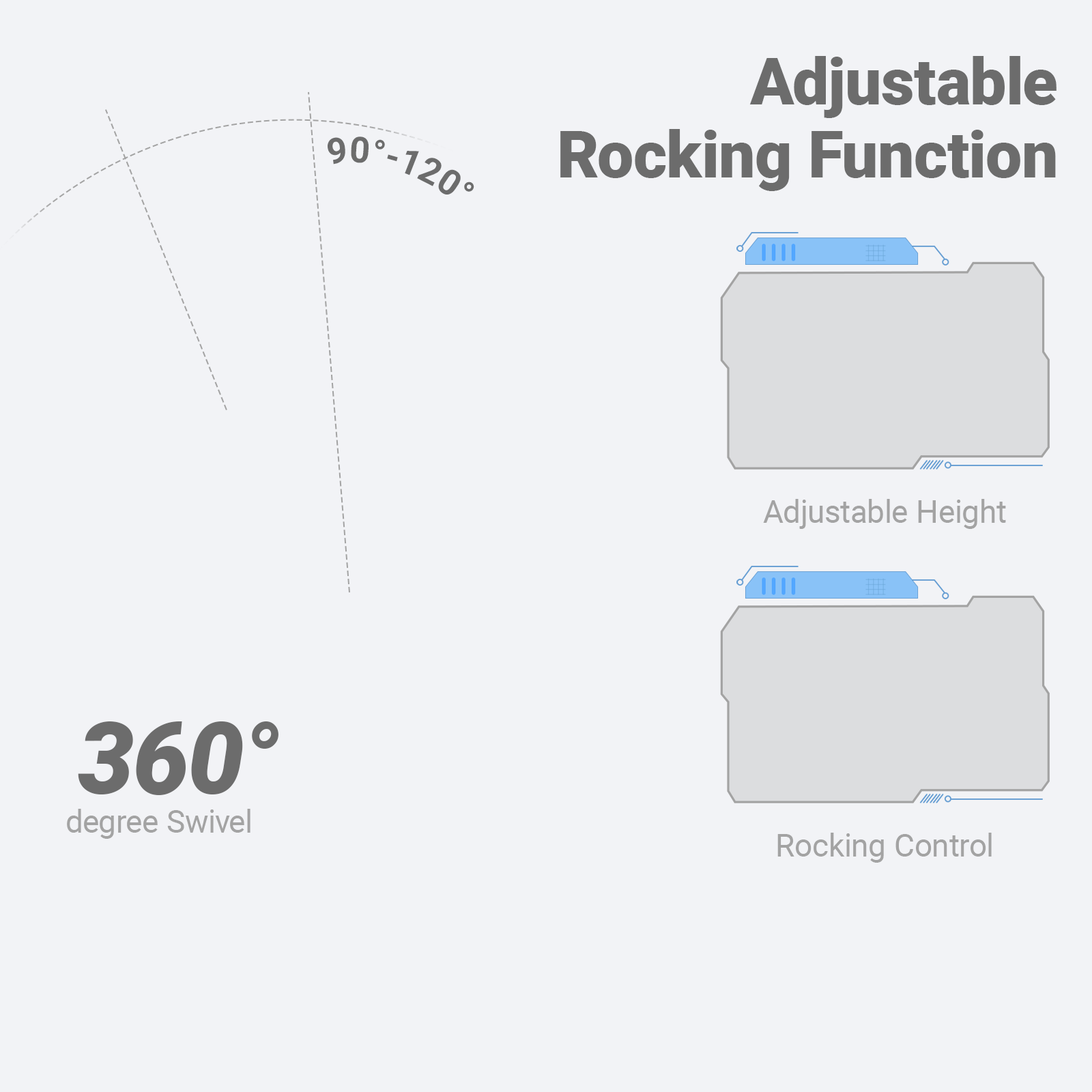
<style>
.page{position:relative;width:1092px;height:1092px;background:#f2f3f6}
.page>*{position:absolute;margin:0}
.t1{font:64.6px/72.8px "Roboto-Black";color:#6c6c6c}
.t2{font:35.7px "Roboto-Bold";color:#6c6c6c}
.t3{font:31.6px "Roboto-Regular";color:#a3a3a3}
.t4{font:100.4px "Roboto-BlackItalic";color:#6c6c6c}
.t5{font:31.5px "Roboto-Regular";color:#a3a3a3}
</style>
<div class="page">
<p class="t1" style="left:560px;top:56px;width:496px;height:135px;text-align:right">Adjustable<br>Rocking Function</p>
<p class="t2" style="left:328px;top:136px;width:146px;height:59px;rotate:28deg">90°-120°</p>
<p class="t3" style="left:763px;top:499px;width:243px;height:30px">Adjustable Height</p>
<p class="t4" style="left:78px;top:721px;width:200px;height:74px">360°</p>
<p class="t5" style="left:67px;top:809px;width:183px;height:30px">degree Swivel</p>
<p class="t3" style="left:777px;top:833px;width:215px;height:30px">Rocking Control</p>
</div>
